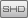
<style>
.page{position:relative;width:28px;height:18px}
.page>*{position:absolute;margin:0}
.t1{font:8px "Eurostile-ExtendedTwo";scale:0.9 1}
</style>
<div class="page">
<p class="t1" style="left:3px;top:6px;width:22px;height:6px">SHD</p>
</div>
